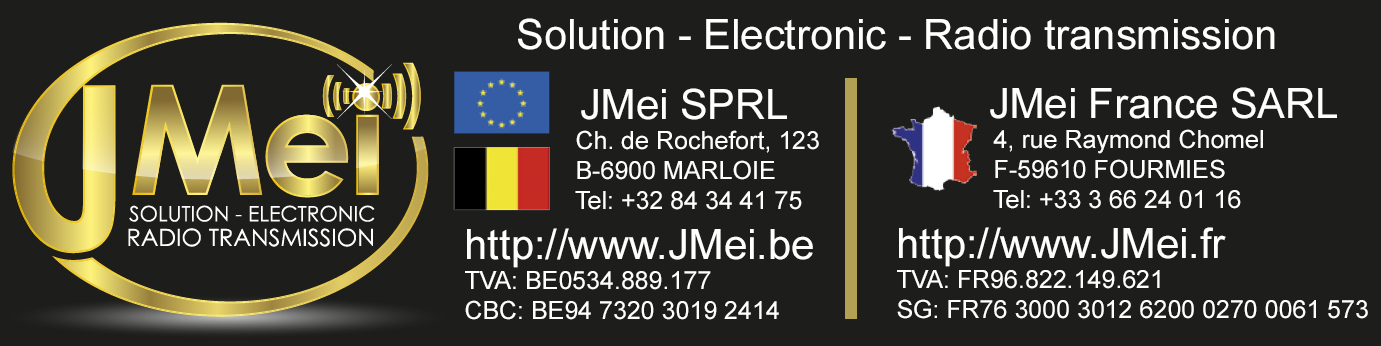
<style>
.page{position:relative;width:1381px;height:346px;background:#1d1d1b}
.page>*{position:absolute;margin:0}
.t1{font:41.7px "ArialMT";color:#fffffd}
.t2{font:25px "ArialMT";color:#fffffd}
</style>
<div class="page">
<p class="t1" style="left:518px;top:18px;width:757px;height:32px">Solution - Electronic - Radio transmission</p>
<p class="t2" style="left:465px;top:88px;width:354px;height:232px"><span class="t1">          JMei SPRL<br></span>                Ch. de Rochefort, 123<br>                B-6900 MARLOIE<br>                Tel: +32 84 34 41 75<br><span class="t1">http://www.JMei.be<br></span>TVA: BE0534.889.177<br>CBC: BE94 7320 3019 2414</p>
<p class="t2" style="left:897px;top:87px;width:471px;height:232px"><span class="t1">        JMei France SARL<br></span>              4, rue Raymond Chomel<br>              F-59610 FOURMIES<br>              Tel: +33 3 66 24 01 16<br><span class="t1">http://www.JMei.fr<br></span>TVA: FR96.822.149.621<br>SG: FR76 3000 3012 6200 0270 0061 573</p>
</div>
